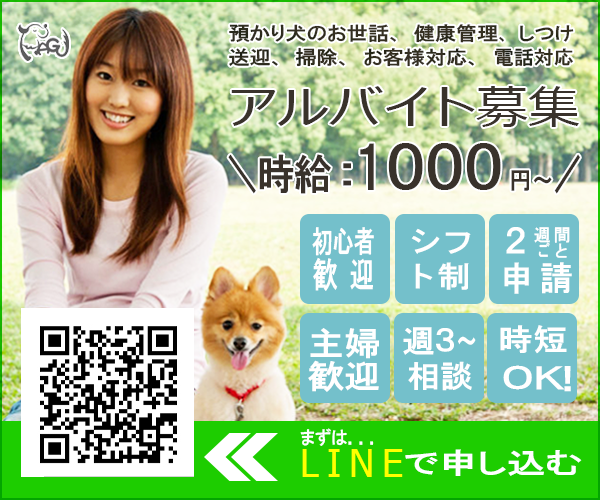
<style>
.page{position:relative;width:600px;height:500px}
.page>*{position:absolute;margin:0}
.t1{font:19.1px/23.9px "HGPGothicE";color:#39322b;scale:1.11 1}
.t2{font:19.1px/23.9px "HGPGothicE";color:#39322b;scale:0.9 1}
.t3{font:19.1px/23.9px "HGPGothicE";letter-spacing:0.04em;color:#39322b;scale:1.11 1}
.t4{font:19.1px/23.9px "HGPGothicE";letter-spacing:0.12em;color:#39322b;scale:1.07 1}
.t5{font:19.1px/23.9px "HGPGothicE";color:#39322b;scale:1.05 1}
.t6{font:46.3px "MeiryoUI";color:#39322b;scale:1.39 1}
.t7{font:46.3px "MeiryoUI";color:#39322b;scale:1.13 1}
.t8{font:58.3px "HGPGothicE";color:#39322b;scale:1.24 1}
.t9{font:41.7px "HGPGothicE";color:#39322b;scale:0.7 1}
.t10{font:41.7px "HGPGothicE";color:#39322b;scale:0.9 1}
.t11{font:40.8px "HGPGothicE";color:#39322b;scale:1.51 1}
.t12{font:58.3px "HGPGothicE";color:#39322b}
.t13{font:25px "HGPGothicE";color:#39322b;scale:0.89 1}
.t14{font:41.7px "HGPGothicE";color:#39322b;scale:0.64 1}
.t15{font:30px/30px "HGPGothicE";color:#ffffff;scale:0.7 1}
.t16{font:35px/30px "HGPGothicE";letter-spacing:0.48em;color:#ffffff;scale:0.7 1}
.t17{font:30px/35px "HGPGothicE";letter-spacing:0.1em;color:#ffffff;scale:1.13 1}
.t18{font:33.3px "HGPGothicE";letter-spacing:0.2em;color:#ffffff}
.t19{font:17.3px/15.1px "HGPGothicE";letter-spacing:0.2em;color:#ffffff;scale:0.97 1}
.t20{font:17.3px/15.1px "HGPGothicE";letter-spacing:0.38em;color:#ffffff;scale:0.76 1}
.t21{font:32.7px/32.7px "HGPGothicE";color:#ffffff;scale:1.11 1}
.t22{font:30.6px/36.8px "HGPGothicE";color:#ffffff;scale:1.07 1}
.t23{font:30.7px/30.7px "HGPGothicE";color:#ffffff;scale:1.07 1}
.t24{font:29.2px/30.7px "HGPGothicE";color:#ffffff;scale:1.1 1}
.t25{font:30.7px/30.7px "HGPGothicE";color:#ffffff;scale:0.71 1}
.t26{font:30px "HGPGothicE";color:#ffffff;scale:1.16 1}
.t27{font:29.2px "HGPGothicE";color:#ffffff;scale:1.33 1}
.t28{font:29.2px "HGPGothicE";letter-spacing:-0.42em;color:#ffffff;scale:1.37 1}
.t29{font:29.2px "HGPGothicE";letter-spacing:-0.3em;color:#ffffff;scale:1.23 1}
.t30{font:18.3px "HGPGothicE";color:#ffffff;scale:0.9 1}
.t31{font:38.2px "Tahoma";letter-spacing:0.2em;color:#ffff00}
.t32{font:28.5px "HGPGothicE";color:#ffffff;scale:1.35 1}
</style>
<div class="page">
<p class="t1" style="left:229px;top:24px;width:345px;height:43px">預かり犬のお世話、健康管理<span class="t2">、</span>しつけ<br>送迎、掃除<span class="t3">、</span>お客様対応<span class="t4">、</span><span class="t5">電話対応</span></p>
<p class="t6" style="left:231px;top:86px;width:348px;height:41px">アルバイト<span class="t7">募集</span></p>
<p class="t8" style="left:228px;top:143px;width:352px;height:51px"><span class="t9">＼</span><span class="t10">時給</span><span class="t11">:</span><span class="t12">1</span>000<span class="t13">円〜</span><span class="t14">／</span></p>
<p class="t15" style="left:312px;top:227px;width:62px;height:64px;text-align:center">初心者<br><span class="t16">歓迎</span></p>
<p class="t17" style="left:411px;top:228px;width:60px;height:62px;text-align:center">シフ<br>ト制</p>
<p class="t18" style="left:506px;top:227px;width:19px;height:27px">２</p>
<p class="t19" style="left:534px;top:227px;width:36px;height:31px">週間<br> <span class="t20">ご</span>と</p>
<p class="t18" style="left:504px;top:262px;width:68px;height:32px">申請</p>
<p class="t21" style="left:308px;top:328px;width:71px;height:64px;text-align:center">主婦<br>歓迎</p>
<p class="t22" style="left:403px;top:327px;width:73px;height:64px;text-align:center"><span class="t23">週</span><span class="t24">３</span><span class="t25">～<br></span>相談</p>
<p class="t26" style="left:500px;top:325px;width:67px;height:29px">時短</p>
<p class="t27" style="left:503px;top:365px;width:68px;height:27px">Ｏ<span class="t28">Ｋ</span><span class="t29">！</span></p>
<p class="t30" style="left:300px;top:428px;width:74px;height:18px">まずは．．．</p>
<p class="t31" style="left:302px;top:449px;width:101px;height:28px">LINE</p>
<p class="t32" style="left:405px;top:449px;width:177px;height:27px">で申し込む</p>
</div>
